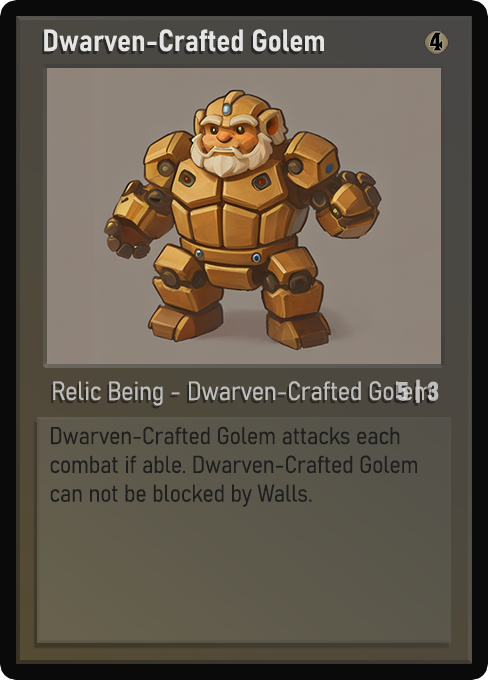
<style>
.page{position:relative;width:488px;height:680px}
.page>*{position:absolute;margin:0}
.t1{font:30px "Bahnschrift-SemiBoldSemiCondensed";color:#f2f2f2;font-weight:bold}
.t2{font:25px "WTRRoycroft";color:#000000;font-weight:bold;scale:1.09 1}
.t3{font:26px "Bahnschrift-LightSemiCondensed";color:#c8c8c8;font-weight:bold}
.t4{font:26px "Bahnschrift-BoldSemiCondensed";color:#bfbebd;font-weight:bold}
.t5{font:24px "Bahnschrift-LightSemiCondensed";color:#1e1e1e;font-weight:bold}
</style>
<div class="page">
<p class="t1" style="left:44px;top:29px;width:280px;height:23px;opacity:0.9">Dwarven-Crafted Golem</p>
<p class="t2" style="left:430px;top:32px;width:13px;height:19px">4</p>
<p class="t3" style="left:53px;top:381px;width:378px;height:25px;opacity:0.9">Relic Being - Dwarven-Crafted Golem</p>
<p class="t4" style="left:397px;top:379px;width:42px;height:24px">5 | 3</p>
<p class="t5" style="left:50px;top:426px;width:367px;height:81px">Dwarven-Crafted Golem attacks each combat if able. Dwarven-Crafted Golem can not be blocked by Walls.</p>
</div>
